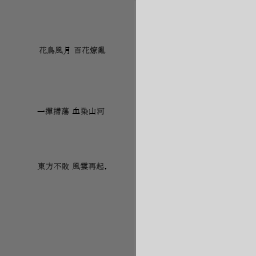
<style>
.page{position:relative;width:256px;height:256px;background:#737373}
.page>*{position:absolute;margin:0}
.t1{font:8px "Gungsuh";color:#000000}
</style>
<div class="page">
<p class="t1" style="left:39px;top:46px;width:67px;height:9px">花鳥風月 百花燎亂</p>
<p class="t1" style="left:37px;top:107px;width:68px;height:8px">一揮掃蕩 血染山河</p>
<p class="t1" style="left:37px;top:162px;width:70px;height:8px">東方不敗 風雲再起,</p>
</div>
